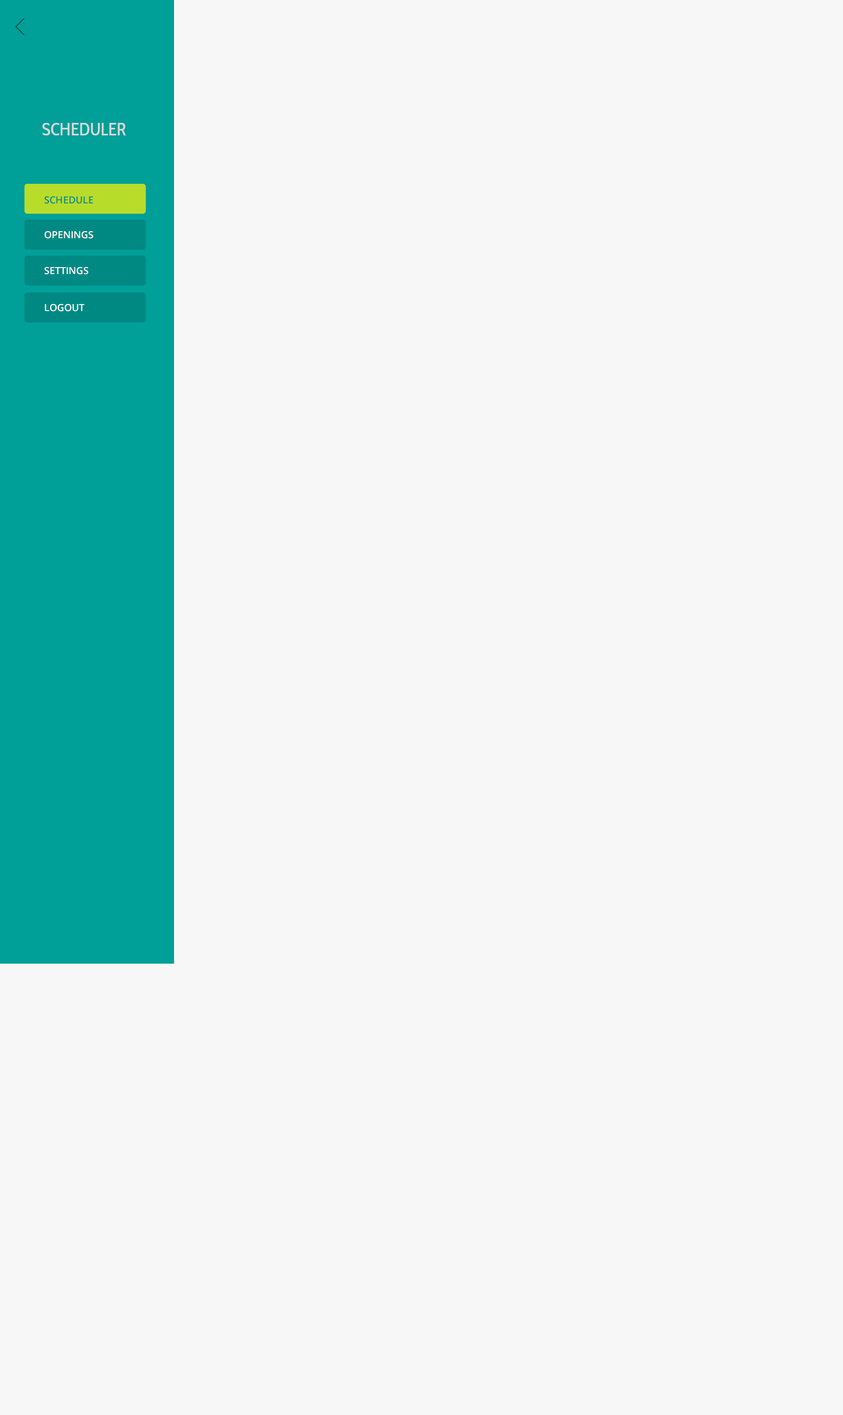
<style>
.page{position:relative;width:843px;height:1415px;background:#f7f7f7}
.page>*{position:absolute;margin:0}
.t1{font:17.4px "CabinCondensed-Medium";color:#d9d9d9}
.t2{font:9.8px "OpenSans-Semibold";color:#008983;text-transform:uppercase}
.t3{font:9.8px "OpenSans-Semibold";color:#ffffff;text-transform:uppercase}
</style>
<div class="page">
<p class="t1" style="left:42px;top:123px;width:84px;height:12px">SCHEDULER</p>
<p class="t2" style="left:45px;top:196px;width:48px;height:8px">SCHEDULE</p>
<p class="t3" style="left:45px;top:231px;width:49px;height:8px">OPENINGS</p>
<p class="t3" style="left:45px;top:267px;width:44px;height:8px">SETTINGS</p>
<p class="t3" style="left:45px;top:304px;width:39px;height:8px">LOGOUT</p>
</div>
